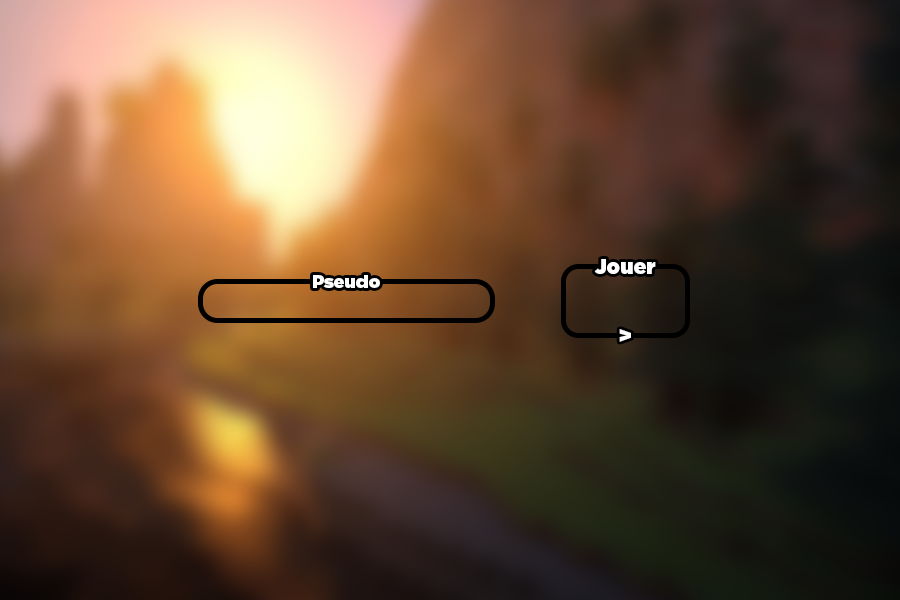
<style>
.page{position:relative;width:900px;height:600px}
.page>*{position:absolute;margin:0}
.t1{font:21px "Gotham-Ultra";color:#ffffff}
.t2{font:18px "Gotham-Ultra";color:#ffffff}
.t3{font:22px "Gotham-Ultra";color:#ffffff}
</style>
<div class="page">
<p class="t1" style="left:594px;top:259px;width:62px;height:15px">Jouer</p>
<p class="t2" style="left:313px;top:275px;width:67px;height:13px">Pseudo</p>
<p class="t3" style="left:619px;top:329px;width:12px;height:13px">&gt;</p>
</div>
